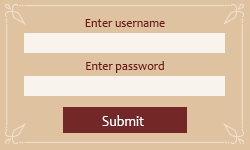
<style>
.page{position:relative;width:250px;height:150px;background:#dfc3a1}
.page>*{position:absolute;margin:0}
.t1{font:12.6px "Candara";color:#6a191a;scale:0.95 1}
.t2{font:14.7px "Candara";color:#ffffff;scale:0.95 1}
</style>
<div class="page">
<p class="t1" style="left:85px;top:19px;width:80px;height:8px">Enter username</p>
<p class="t1" style="left:86px;top:61px;width:78px;height:12px">Enter password</p>
<p class="t2" style="left:102px;top:115px;width:42px;height:11px">Submit</p>
</div>
